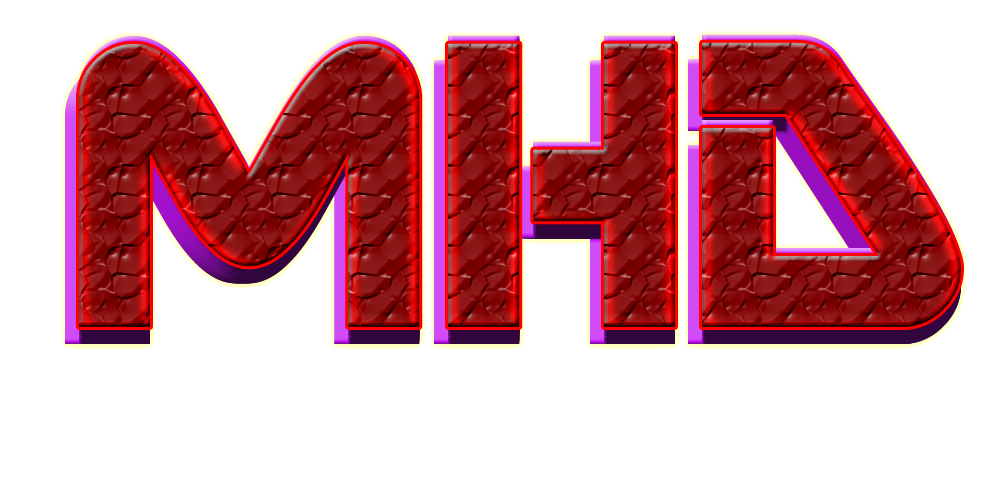
<style>
.page{position:relative;width:1000px;height:500px;background:#ffffff}
.page>*{position:absolute;margin:0}
.t1{font:450.1px "ARDESTINE"}
</style>
<div class="page">
<p class="t1" style="left:79px;top:41px;width:882px;height:285px">MHD</p>
<p class="t1" style="left:79px;top:40px;width:882px;height:285px">MHD</p>
<p class="t1" style="left:79px;top:39px;width:882px;height:285px">MHD</p>
<p class="t1" style="left:79px;top:38px;width:882px;height:285px">MHD</p>
<p class="t1" style="left:79px;top:37px;width:882px;height:285px">MHD</p>
<p class="t1" style="left:79px;top:36px;width:882px;height:285px">MHD</p>
<p class="t1" style="left:79px;top:35px;width:882px;height:285px">MHD</p>
<p class="t1" style="left:79px;top:34px;width:882px;height:285px">MHD</p>
<p class="t1" style="left:79px;top:54px;width:882px;height:285px">MHD</p>
<p class="t1" style="left:79px;top:53px;width:882px;height:285px">MHD</p>
<p class="t1" style="left:79px;top:51px;width:882px;height:285px">MHD</p>
<p class="t1" style="left:79px;top:50px;width:882px;height:285px">MHD</p>
<p class="t1" style="left:79px;top:49px;width:882px;height:285px">MHD</p>
<p class="t1" style="left:79px;top:48px;width:882px;height:285px">MHD</p>
<p class="t1" style="left:79px;top:47px;width:882px;height:285px">MHD</p>
<p class="t1" style="left:79px;top:46px;width:882px;height:285px">MHD</p>
<p class="t1" style="left:79px;top:45px;width:882px;height:285px">MHD</p>
<p class="t1" style="left:79px;top:44px;width:882px;height:285px">MHD</p>
<p class="t1" style="left:79px;top:43px;width:882px;height:285px">MHD</p>
<p class="t1" style="left:79px;top:42px;width:882px;height:285px">MHD</p>
<p class="t1" style="left:79px;top:42px;width:882px;height:285px">MHD</p>
<p class="t1" style="left:65px;top:59px;width:882px;height:285px">MHD</p>
<p class="t1" style="left:66px;top:59px;width:882px;height:285px">MHD</p>
<p class="t1" style="left:67px;top:59px;width:882px;height:285px">MHD</p>
<p class="t1" style="left:68px;top:59px;width:882px;height:285px">MHD</p>
<p class="t1" style="left:69px;top:59px;width:882px;height:285px">MHD</p>
<p class="t1" style="left:70px;top:59px;width:882px;height:285px">MHD</p>
<p class="t1" style="left:71px;top:59px;width:882px;height:285px">MHD</p>
<p class="t1" style="left:72px;top:59px;width:882px;height:285px">MHD</p>
<p class="t1" style="left:73px;top:59px;width:882px;height:285px">MHD</p>
<p class="t1" style="left:74px;top:59px;width:882px;height:285px">MHD</p>
<p class="t1" style="left:75px;top:59px;width:882px;height:285px">MHD</p>
<p class="t1" style="left:76px;top:59px;width:882px;height:285px">MHD</p>
<p class="t1" style="left:77px;top:59px;width:882px;height:285px">MHD</p>
<p class="t1" style="left:78px;top:59px;width:882px;height:285px">MHD</p>
<p class="t1" style="left:79px;top:59px;width:882px;height:285px">MHD</p>
<p class="t1" style="left:79px;top:58px;width:882px;height:285px">MHD</p>
<p class="t1" style="left:79px;top:57px;width:882px;height:285px">MHD</p>
<p class="t1" style="left:79px;top:56px;width:882px;height:285px">MHD</p>
<p class="t1" style="left:79px;top:55px;width:882px;height:285px">MHD</p>
</div>
